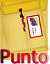
<style>
.page{position:relative;width:50px;height:64px}
.page>*{position:absolute;margin:0}
.t1{font:19px "TrebuchetMS"}
</style>
<div class="page">
<p class="t1" style="left:1px;top:49px;width:48px;height:15px">Punto</p>
</div>
